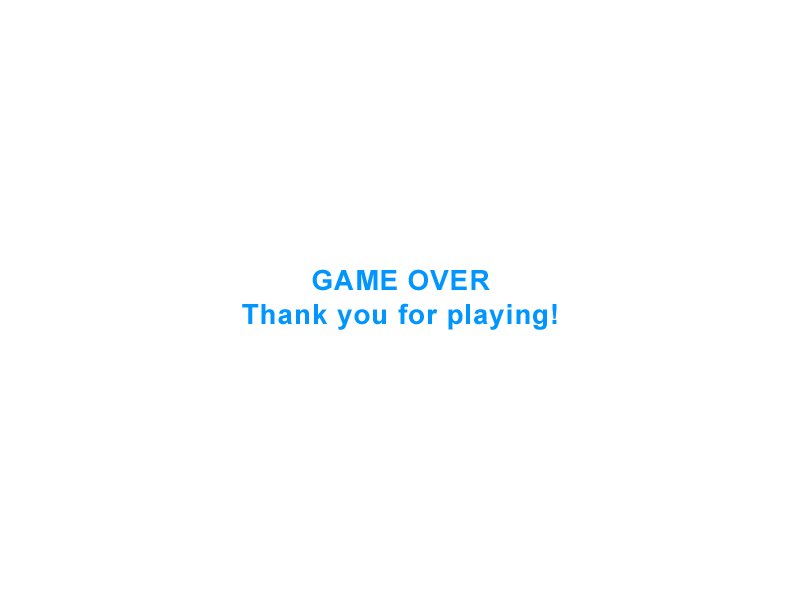
<style>
.page{position:relative;width:800px;height:600px;background:#ffffff}
.page>*{position:absolute;margin:0}
.t1{font:28px "Arial-BoldMT";letter-spacing:0.03em;color:#0095ff}
</style>
<div class="page">
<p class="t1" style="left:242px;top:269px;width:315px;height:61px;text-align:center">GAME OVER<br>Thank you for playing!</p>
</div>
